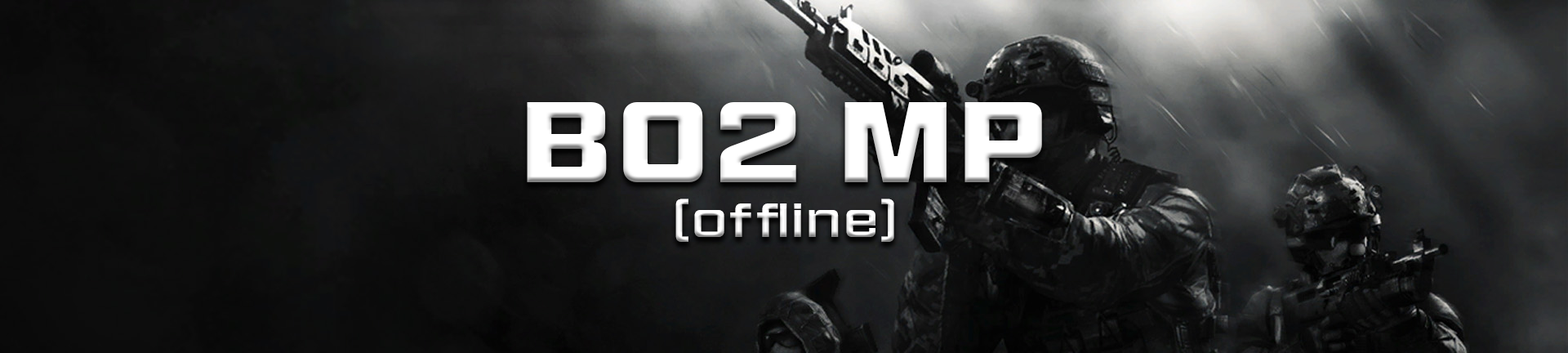
<style>
.page{position:relative;width:1568px;height:353px}
.page>*{position:absolute;margin:0}
.t1{font:106.6px "HitmarkerNormal-Bold";letter-spacing:0.12em;color:#ffffff}
.t2{font:45.4px "HitmarkerNormal-Regular";letter-spacing:0.12em;color:#ffffff}
</style>
<div class="page">
<p class="t1" style="left:527px;top:102px;width:515px;height:80px">BO2 MP</p>
<p class="t2" style="left:675px;top:198px;width:219px;height:44px">(offline)</p>
</div>
